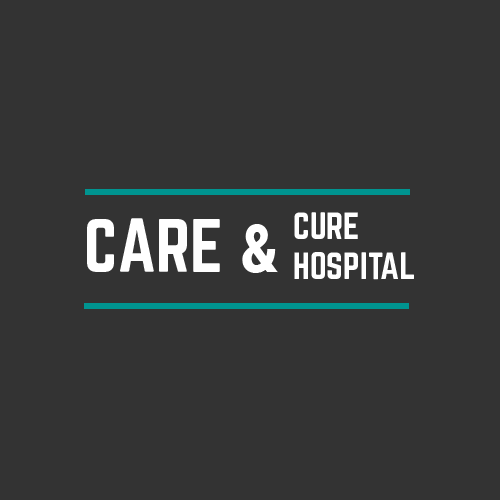
<style>
.page{position:relative;width:500px;height:500px;background:#333333}
.page>*{position:absolute;margin:0}
.t1{font:66.7px "Norwester-Regular";color:#ffffff;text-transform:uppercase}
.t2{font:66.7px "RobotoCondensed-Bold";color:#ffffff;text-transform:uppercase}
.t3{font:33.3px "Norwester-Regular";color:#fefefe;text-transform:uppercase}
</style>
<div class="page">
<p class="t1" style="left:87px;top:218px;width:191px;height:55px">Care <span class="t2">&amp;</span></p>
<p class="t3" style="left:294px;top:212px;width:120px;height:68px">Cure<br>Hospital</p>
</div>
